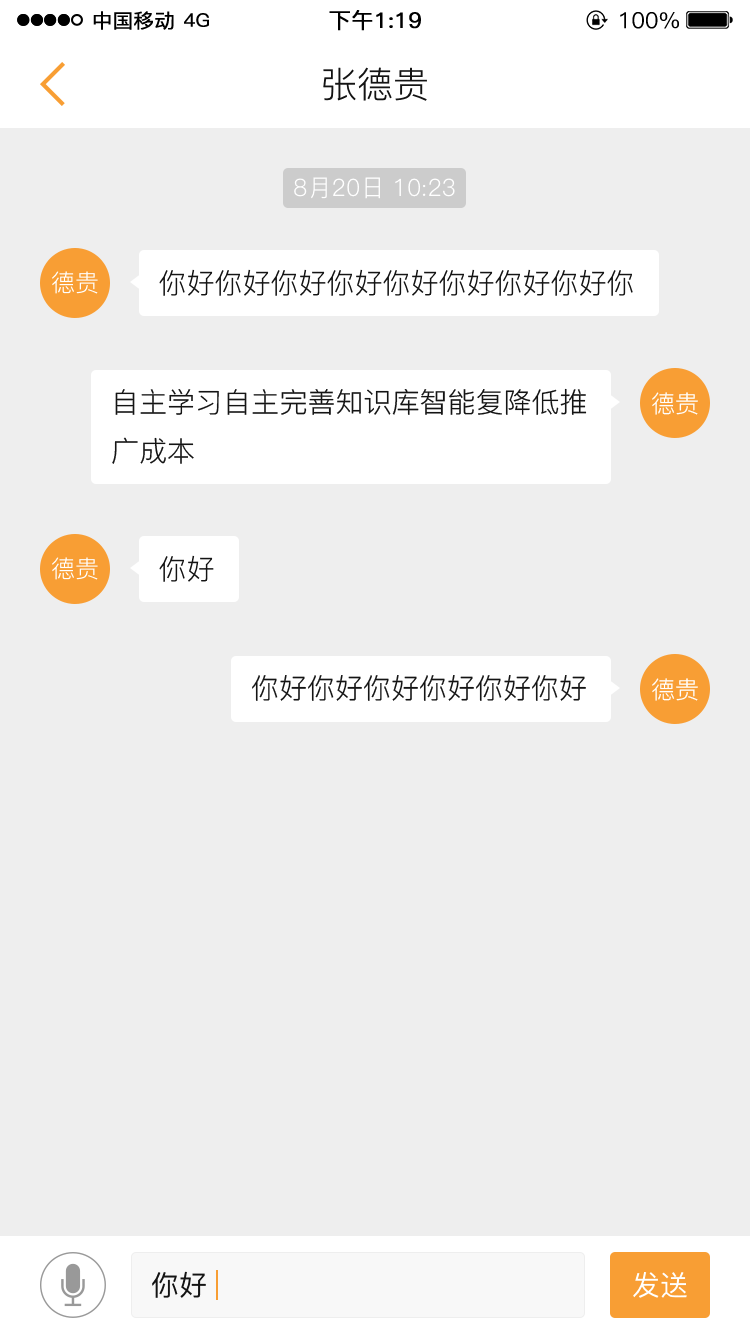
<style>
.page{position:relative;width:750px;height:1334px;background:#eeeeee}
.page>*{position:absolute;margin:0}
.t1{font:36px "PingFang-SC-Regular";color:#141414}
.t2{font:24px "PingFang-SC-Regular";color:#ffffff}
.t3{font:28px "PingFang-SC-Regular";color:#141414}
.t4{font:28px "PingFang-SC-Medium";color:#141414}
.t5{font:28px "PingFang-SC-Medium";color:#ffffff}
</style>
<div class="page">
<p class="t1" style="left:323px;top:67px;width:104px;height:34px">张德贵</p>
<p class="t2" style="left:294px;top:177px;width:161px;height:22px">8月20日 10:23</p>
<p class="t3" style="left:159px;top:269px;width:474px;height:27px">你好你好你好你好你好你好你好你好你</p>
<p class="t2" style="left:52px;top:271px;width:46px;height:23px">德贵</p>
<p class="t3" style="left:112px;top:388px;width:475px;height:76px">自主学习自主完善知识库智能复降低推广成本<br>智能回复，降低推广成本</p>
<p class="t2" style="left:652px;top:392px;width:46px;height:23px">德贵</p>
<p class="t2" style="left:52px;top:557px;width:46px;height:23px">德贵</p>
<p class="t3" style="left:159px;top:555px;width:55px;height:27px">你好</p>
<p class="t3" style="left:252px;top:675px;width:334px;height:26px">你好你好你好你好你好你好</p>
<p class="t2" style="left:652px;top:678px;width:46px;height:23px">德贵</p>
<p class="t4" style="left:152px;top:1271px;width:54px;height:27px">你好</p>
<p class="t5" style="left:633px;top:1272px;width:54px;height:26px">发送</p>
</div>
